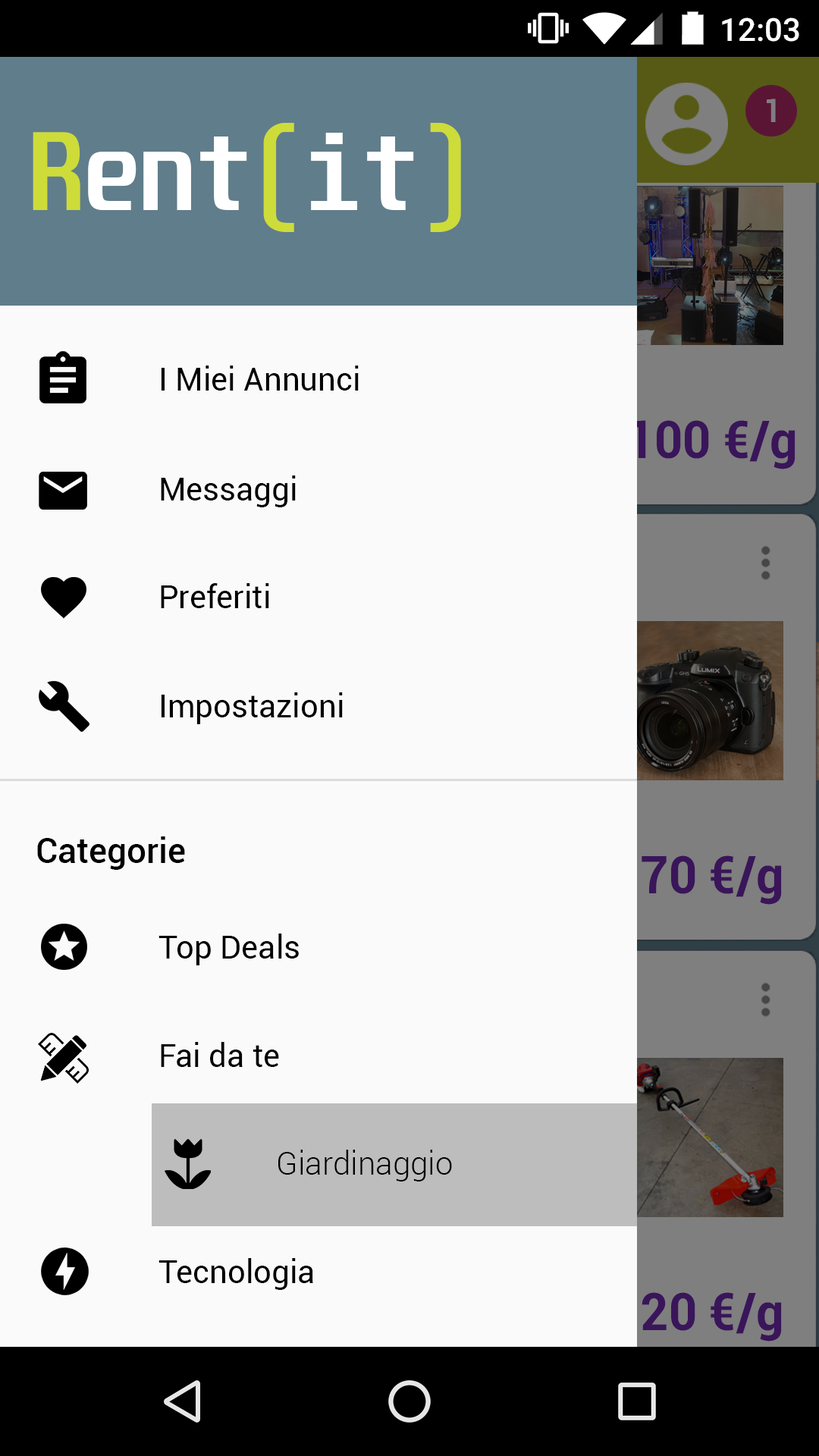
<style>
.page{position:relative;width:819px;height:1456px;background:#fafafa}
.page>*{position:absolute;margin:0}
.t1{font:32.2px "Roboto-Bold";color:#7f7f7f;scale:0.94 1}
.t2{font:91px "Unispace-Bold";color:#ffffff}
.t3{font:96.5px "Unispace-Bold";color:#cddc39;scale:0.94 1}
.t4{font:91px "Unispace-Bold";color:#cddc39}
.t5{font:31.8px "Roboto-Regular";color:#000000}
.t6{font:52.2px "Roboto-Bold";color:#3a155a;scale:0.94 1}
.t7{font:34.9px "Roboto-Medium";color:#000000}
.t8{font:31.8px "Roboto-Light";color:#000000}
</style>
<div class="page">
<p class="t1" style="left:767px;top:99px;width:9px;height:23px">1</p>
<p class="t2" style="left:33px;top:123px;width:428px;height:109px"><span class="t3">R</span>ent<span class="t4">(</span>it<span class="t4">)</span></p>
<p class="t5" style="left:161px;top:366px;width:198px;height:25px">I Miei Annunci</p>
<p class="t6" style="left:631px;top:420px;width:164px;height:49px">100 €/g</p>
<p class="t5" style="left:161px;top:475px;width:135px;height:32px">Messaggi</p>
<p class="t5" style="left:161px;top:583px;width:108px;height:25px">Preferiti</p>
<p class="t5" style="left:161px;top:692px;width:182px;height:32px">Impostazioni</p>
<p class="t7" style="left:37px;top:836px;width:148px;height:34px">Categorie</p>
<p class="t6" style="left:642px;top:855px;width:140px;height:50px">70 €/g</p>
<p class="t5" style="left:158px;top:933px;width:141px;height:32px">Top Deals</p>
<p class="t5" style="left:161px;top:1042px;width:118px;height:25px">Fai da te</p>
<p class="t8" style="left:278px;top:1150px;width:174px;height:31px">Giardinaggio</p>
<p class="t5" style="left:158px;top:1258px;width:155px;height:32px">Tecnologia</p>
<p class="t6" style="left:642px;top:1292px;width:140px;height:49px">20 €/g</p>
</div>
